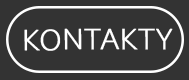
<style>
.page{position:relative;width:189px;height:80px;background:#333333}
.page>*{position:absolute;margin:0}
.t1{font:31px "CorbelLight";color:#ffffff;font-weight:bold}
</style>
<div class="page">
<p class="t1" style="left:24px;top:28px;width:149px;height:23px">KONTAKTY</p>
</div>
